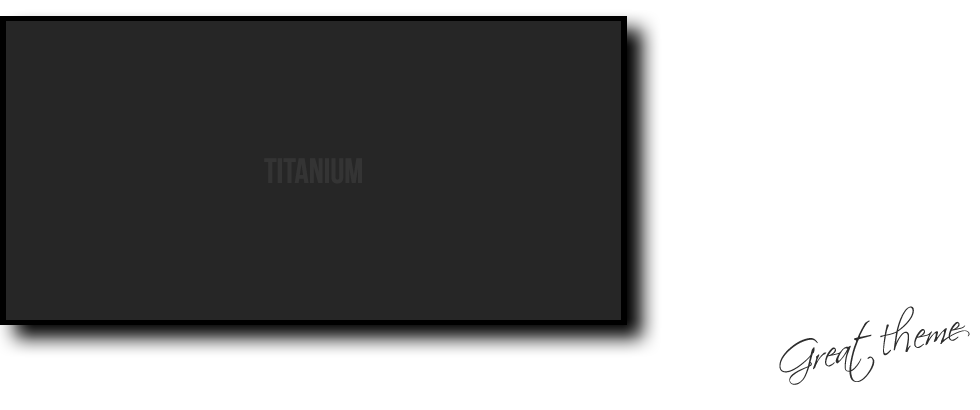
<style>
.page{position:relative;width:980px;height:410px;background:#262626}
.page>*{position:absolute;margin:0}
.t1{font:35px "BebasNeue";color:#343434}
.t2{font:40px "ScriptinaPro";color:#2d2d2d}
</style>
<div class="page">
<p class="t1" style="left:264px;top:158px;width:98px;height:26px">titanium</p>
<p class="t2" style="left:779px;top:306px;width:191px;height:79px;rotate:-12deg">Great  theme</p>
</div>
